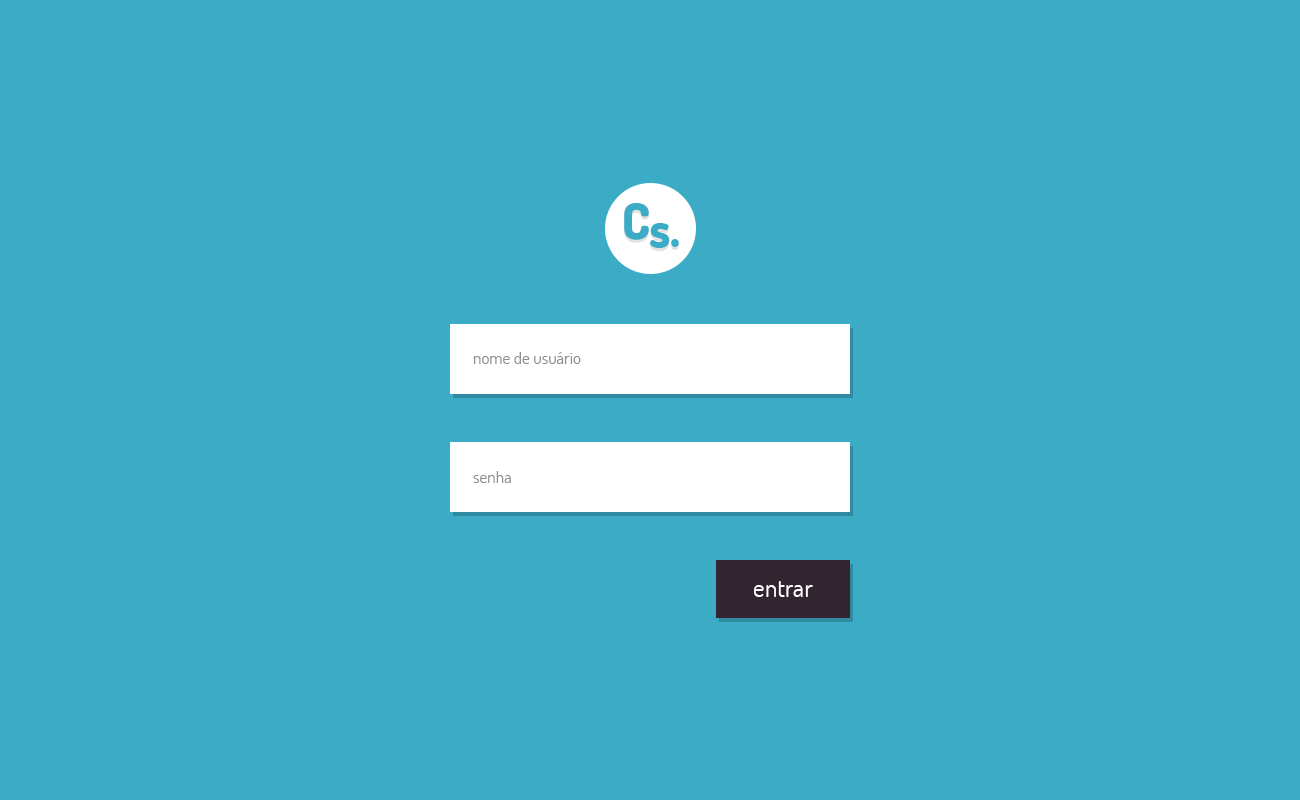
<style>
.page{position:relative;width:1300px;height:800px;background:#3cabc6}
.page>*{position:absolute;margin:0}
.t1{font:17px "Dosis-Regular";color:#8f8f8f}
.t2{font:25.3px "Dosis-Regular";color:#ffffff}
</style>
<div class="page">
<p class="t1" style="left:473px;top:352px;width:108px;height:12px">nome de usuário</p>
<p class="t1" style="left:473px;top:471px;width:38px;height:12px">senha</p>
<p class="t2" style="left:754px;top:581px;width:59px;height:16px">entrar</p>
</div>
